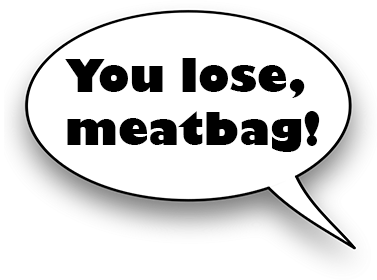
<style>
.page{position:relative;width:377px;height:280px;background:#ffffff}
.page>*{position:absolute;margin:0}
.t1{font:44px "GillSans-UltraBold";color:#000000}
</style>
<div class="page">
<p class="t1" style="left:65px;top:58px;width:255px;height:94px">You lose, <br>meatbag!</p>
</div>
